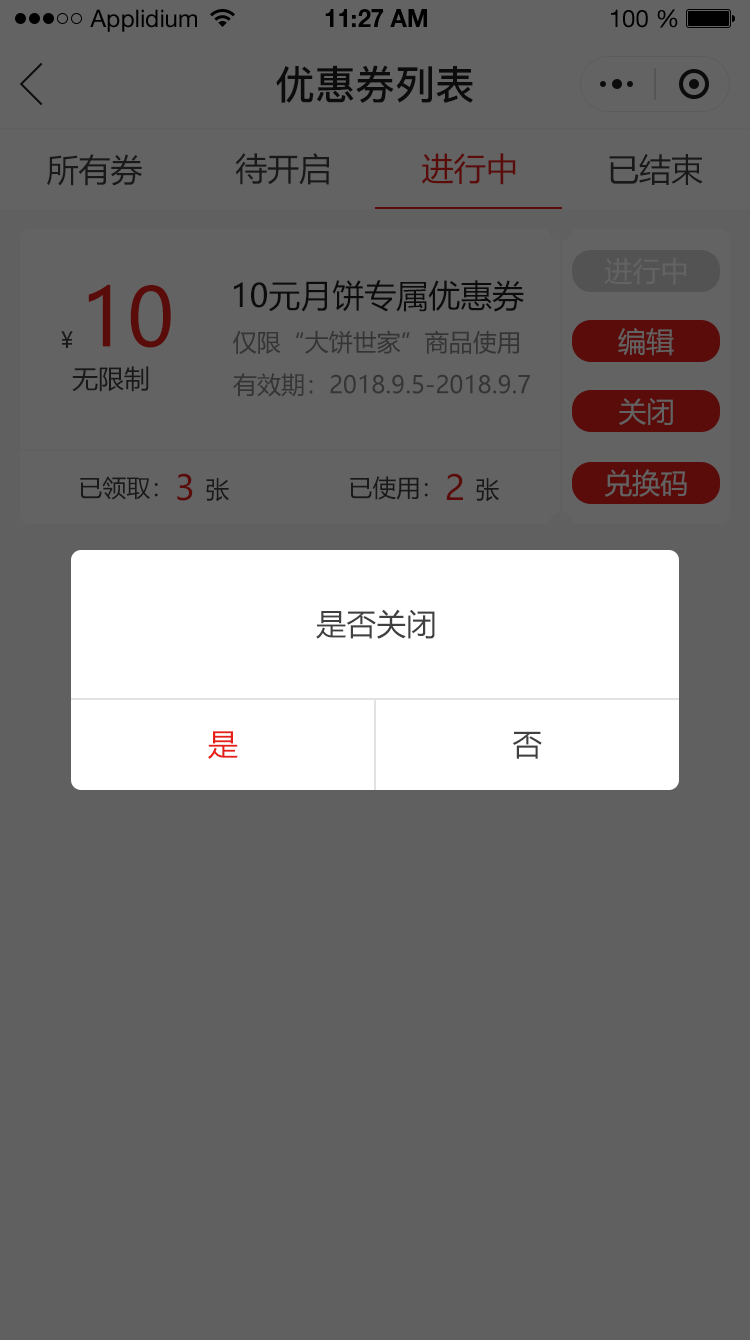
<style>
.page{position:relative;width:750px;height:1340px;background:#606060}
.page>*{position:absolute;margin:0}
.t1{font:24px "HelveticaNeueLTStd-Roman";color:#000000}
.t2{font:24px "HelveticaNeueLTStd-Bd";color:#000000}
.t3{font:40px "PingFang-SC-Bold";color:#202020;text-transform:uppercase}
.t4{font:32px "MicrosoftYaHei";color:#191919;text-transform:uppercase}
.t5{font:32px "MicrosoftYaHei";color:#590c09;text-transform:uppercase}
.t6{font:28px "MicrosoftYaHei";color:#636363;text-transform:uppercase}
.t7{font:32px "MicrosoftYaHei";color:#202020;text-transform:uppercase}
.t8{font:80px "MicrosoftYaHei";color:#590c09;text-transform:uppercase}
.t9{font:22px "MicrosoftYaHei";color:#191919;text-transform:uppercase}
.t10{font:24px "MicrosoftYaHei";color:#353535;text-transform:uppercase}
.t11{font:26px "MicrosoftYaHei";color:#191919;text-transform:uppercase}
.t12{font:34px "MicrosoftYaHei";color:#590c09;text-transform:uppercase}
.t13{font:24px "MicrosoftYaHei";color:#191919;text-transform:uppercase}
.t14{font:30px "MicrosoftYaHei";color:#404040;text-transform:uppercase}
.t15{font:30px "MicrosoftYaHei";color:#e61f18;text-transform:uppercase}
</style>
<div class="page">
<p class="t1" style="left:90px;top:9px;width:107px;height:23px">Applidium</p>
<p class="t2" style="left:325px;top:9px;width:102px;height:18px">11:27 AM</p>
<p class="t1" style="left:611px;top:9px;width:67px;height:19px">100 %</p>
<p class="t3" style="left:276px;top:65px;width:197px;height:38px">优惠券列表</p>
<p class="t4" style="left:47px;top:154px;width:95px;height:32px">所有券</p>
<p class="t4" style="left:235px;top:153px;width:94px;height:32px">待开启</p>
<p class="t5" style="left:422px;top:153px;width:94px;height:32px">进行中</p>
<p class="t4" style="left:609px;top:154px;width:94px;height:31px">已结束</p>
<p class="t6" style="left:604px;top:257px;width:83px;height:28px">进行中</p>
<p class="t7" style="left:234px;top:280px;width:290px;height:32px">10元月饼专属优惠券</p>
<p class="t8" style="left:88px;top:284px;width:83px;height:64px">10</p>
<p class="t6" style="left:618px;top:328px;width:56px;height:28px">编辑</p>
<p class="t9" style="left:61px;top:331px;width:12px;height:17px">¥</p>
<p class="t10" style="left:233px;top:330px;width:286px;height:25px">仅限“大饼世家”商品使用</p>
<p class="t11" style="left:72px;top:366px;width:77px;height:26px">无限制</p>
<p class="t10" style="left:233px;top:373px;width:297px;height:24px">有效期：2018.9.5-2018.9.7</p>
<p class="t6" style="left:619px;top:398px;width:54px;height:27px">关闭</p>
<p class="t12" style="left:177px;top:473px;width:16px;height:28px">3</p>
<p class="t12" style="left:446px;top:473px;width:17px;height:27px">2</p>
<p class="t6" style="left:604px;top:469px;width:83px;height:28px">兑换码</p>
<p class="t13" style="left:80px;top:476px;width:78px;height:24px">已领取：</p>
<p class="t13" style="left:206px;top:478px;width:23px;height:24px">张</p>
<p class="t13" style="left:350px;top:476px;width:78px;height:24px">已使用：</p>
<p class="t13" style="left:476px;top:478px;width:23px;height:24px">张</p>
<p class="t14" style="left:316px;top:609px;width:119px;height:30px">是否关闭</p>
<p class="t15" style="left:208px;top:731px;width:30px;height:28px">是</p>
<p class="t14" style="left:512px;top:731px;width:30px;height:28px">否</p>
</div>
